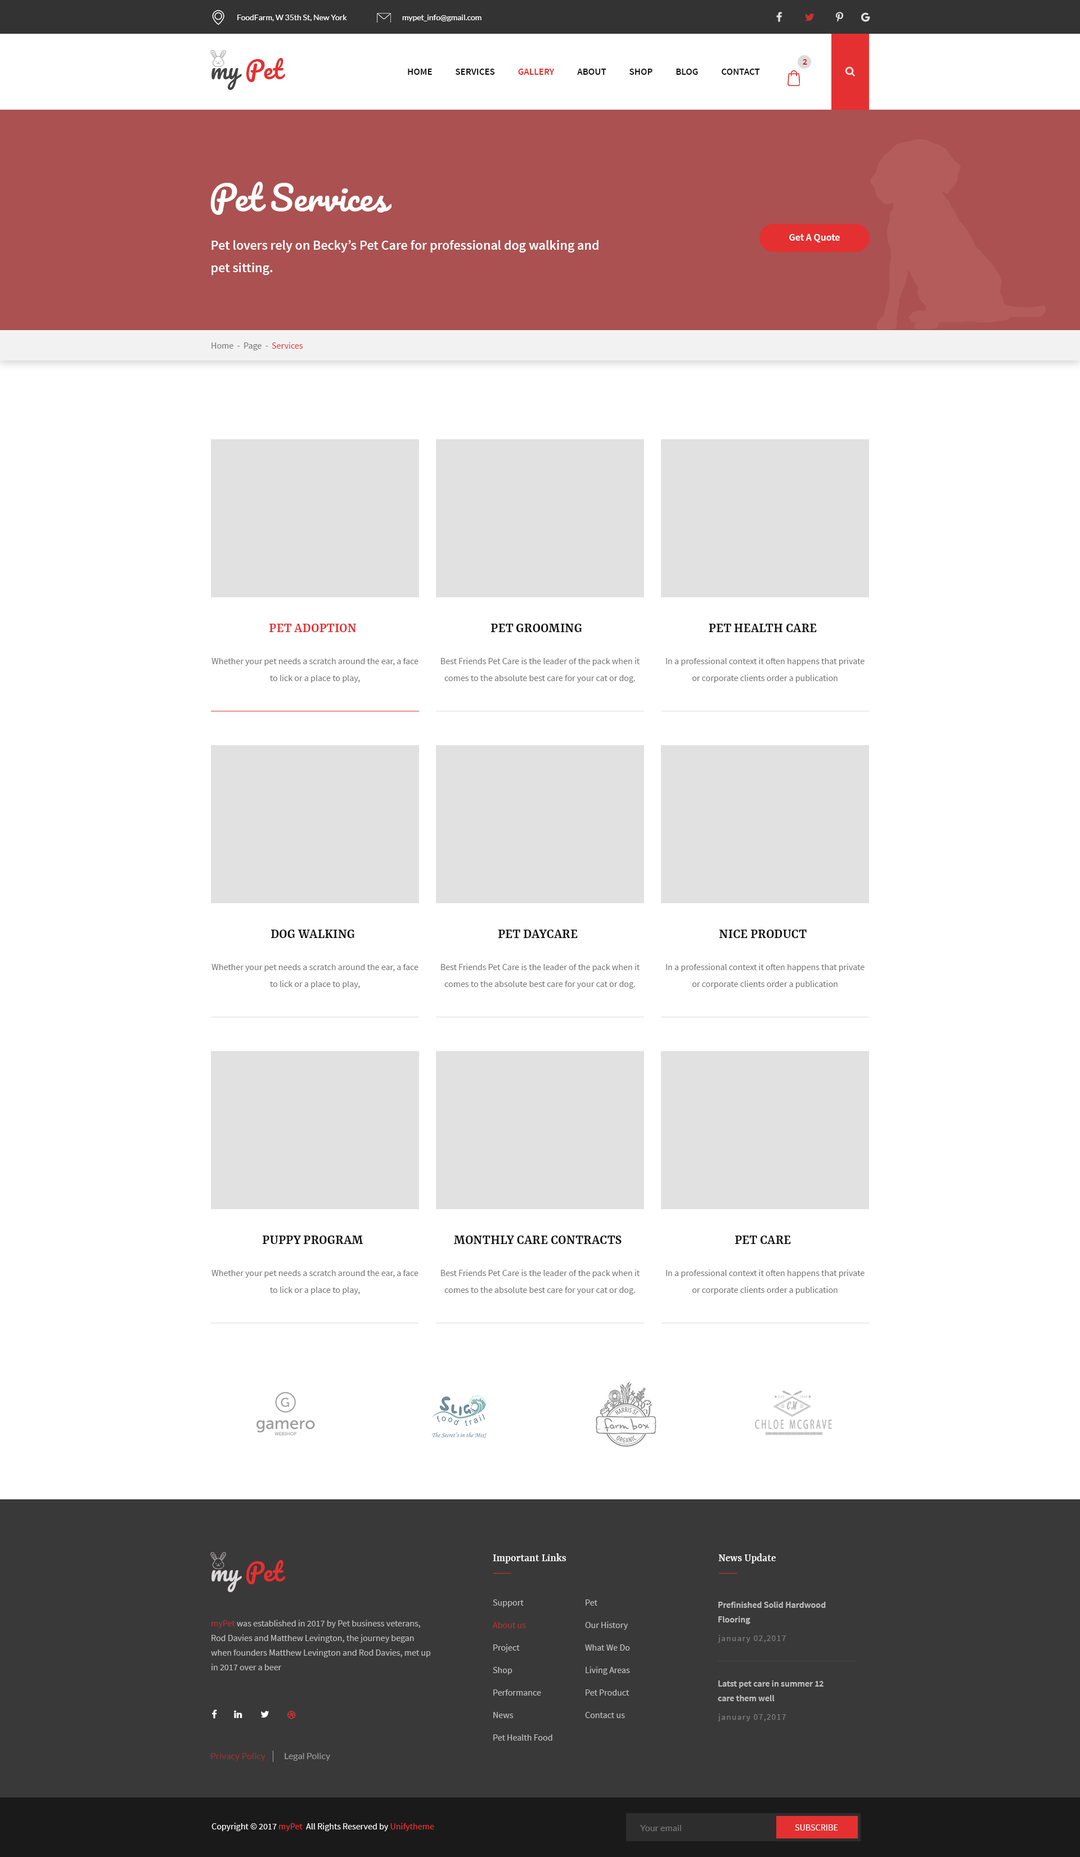
<style>
.page{position:relative;width:1080px;height:1857px;background:#ffffff}
.page>*{position:absolute;margin:0}
.t1{font:7.9px "Lato-Regular";color:#ffffff}
.t2{font:23.6px "Pacifico-Regular";color:#e53031}
.t3{font:23.6px "Pacifico-Regular";color:#454444}
.t4{font:9px "SourceSansPro-SemiBold";color:#d12526;text-transform:uppercase}
.t5{font:9.6px "SourceSansPro-SemiBold";color:#121212;text-transform:uppercase}
.t6{font:9.6px "SourceSansPro-SemiBold";color:#e53031;text-transform:uppercase}
.t7{font:33.8px "Pacifico-Regular";color:#ffffff}
.t8{font:13.5px/22.5px "SourceSansPro-SemiBold";color:#ffffff}
.t9{font:10.1px "SourceSansPro-SemiBold";color:#fffefe}
.t10{font:9px "SourceSansPro-Regular";color:#767575}
.t11{font:9px "SourceSansPro-Regular";color:#e53031}
.t12{font:14.1px "Yrsa-SemiBold";color:#e53031}
.t13{font:14.1px "Yrsa-SemiBold";color:#121212}
.t14{font:14.1px "Yrsa-SemiBold";color:#121212;text-transform:uppercase}
.t15{font:9px/16.9px "SourceSansPro-Regular";color:#737373}
.t16{font:11.2px "Yrsa-Medium";color:#ffffff}
.t17{font:23.6px "Pacifico-Regular";color:#dcdada}
.t18{font:9px/22.5px "SourceSansPro-Regular";color:#c0c0c0}
.t19{font:9px/14.6px "SourceSansPro-SemiBold";color:#c0c0c0}
.t20{font:9px/14.6px "SourceSansPro-Regular";color:#c0c0c0}
.t21{font:8.4px "SourceSansPro-Regular";letter-spacing:0.1em;color:#7d7d7d}
.t22{font:9px "Lato-Regular";color:#8e3536}
.t23{font:9px "Lato-Regular";color:#9c9b9b}
.t24{font:9px "SourceSansPro-Regular";color:#fefefe}
.t25{font:9px "Lato-Regular";color:#777777}
.t26{font:9px "SourceSansPro-Regular";color:#ffffff;text-transform:uppercase}
</style>
<div class="page">
<p class="t1" style="left:237px;top:15px;width:110px;height:6px">FoodFarm, W 35th St, New York</p>
<p class="t1" style="left:402px;top:15px;width:80px;height:6px">mypet_info@gmail.com</p>
<p class="t2" style="left:212px;top:58px;width:73px;height:32px"><span class="t3">my </span>Pet</p>
<p class="t4" style="left:803px;top:59px;width:4px;height:6px">2</p>
<p class="t5" style="left:408px;top:69px;width:352px;height:6px">Home            Services            <span class="t6">Gallery            </span>About            Shop            Blog            Contact</p>
<p class="t7" style="left:210px;top:182px;width:182px;height:33px">Pet Services</p>
<p class="t8" style="left:212px;top:240px;width:386px;height:35px">Pet lovers rely on Becky’s Pet Care for professional dog walking and pet sitting.</p>
<p class="t9" style="left:789px;top:234px;width:51px;height:8px">Get A Quote</p>
<p class="t10" style="left:212px;top:342px;width:91px;height:8px">Home  -  Page  - <span class="t11"> Services</span></p>
<p class="t12" style="left:269px;top:624px;width:88px;height:8px">PET ADOPTION</p>
<p class="t13" style="left:490px;top:624px;width:92px;height:8px">PET GROOMING</p>
<p class="t14" style="left:709px;top:624px;width:108px;height:8px">Pet Health care</p>
<p class="t15" style="left:212px;top:658px;width:206px;height:25px;text-align:center">Whether your pet needs a scratch around the ear, a face to lick or a place to play,</p>
<p class="t15" style="left:441px;top:658px;width:199px;height:25px;text-align:center">Best Friends Pet Care is the leader of the pack when it comes to the absolute best care for your cat or dog.</p>
<p class="t15" style="left:666px;top:658px;width:199px;height:25px;text-align:center">In a professional context it often happens that private or corporate clients order a publication</p>
<p class="t13" style="left:271px;top:930px;width:84px;height:8px">DOG WALKING</p>
<p class="t13" style="left:498px;top:930px;width:80px;height:8px">PET DAYCARE</p>
<p class="t14" style="left:719px;top:930px;width:88px;height:8px">Nice Product</p>
<p class="t15" style="left:212px;top:964px;width:206px;height:25px;text-align:center">Whether your pet needs a scratch around the ear, a face to lick or a place to play,</p>
<p class="t15" style="left:441px;top:964px;width:199px;height:25px;text-align:center">Best Friends Pet Care is the leader of the pack when it comes to the absolute best care for your cat or dog.</p>
<p class="t15" style="left:666px;top:964px;width:199px;height:25px;text-align:center">In a professional context it often happens that private or corporate clients order a publication</p>
<p class="t14" style="left:262px;top:1236px;width:101px;height:8px">Puppy Program</p>
<p class="t14" style="left:453px;top:1236px;width:169px;height:8px">Monthly Care Contracts</p>
<p class="t14" style="left:735px;top:1236px;width:56px;height:8px">Pet Care</p>
<p class="t15" style="left:212px;top:1270px;width:206px;height:25px;text-align:center">Whether your pet needs a scratch around the ear, a face to lick or a place to play,</p>
<p class="t15" style="left:441px;top:1270px;width:199px;height:25px;text-align:center">Best Friends Pet Care is the leader of the pack when it comes to the absolute best care for your cat or dog.</p>
<p class="t15" style="left:666px;top:1270px;width:199px;height:25px;text-align:center">In a professional context it often happens that private or corporate clients order a publication</p>
<p class="t16" style="left:493px;top:1554px;width:73px;height:10px">Important Links</p>
<p class="t16" style="left:718px;top:1554px;width:58px;height:10px">News Update</p>
<p class="t2" style="left:212px;top:1560px;width:73px;height:32px"><span class="t17">my </span>Pet</p>
<p class="t18" style="left:493px;top:1600px;width:59px;height:141px">Support<br>About us <br>Project<br>Shop<br>Performance<br>News<br>Pet Health Food</p>
<p class="t18" style="left:585px;top:1600px;width:45px;height:118px">Pet<br>Our History<br>What We Do<br>Living Areas<br>Pet Product<br>Contact us</p>
<p class="t19" style="left:718px;top:1602px;width:108px;height:22px">Prefinished Solid Hardwood <br>Flooring</p>
<p class="t20" style="left:211px;top:1620px;width:220px;height:51px">myPet was established in 2017 by Pet business veterans, Rod Davies and Matthew Levington, the journey began when founders Matthew Levington and Rod Davies, met up in 2017 over a beer</p>
<p class="t21" style="left:718px;top:1635px;width:68px;height:8px">january 02,2017</p>
<p class="t19" style="left:718px;top:1681px;width:106px;height:21px">Latst pet care in summer 12<br>care them well</p>
<p class="t21" style="left:718px;top:1714px;width:68px;height:8px">january 07,2017</p>
<p class="t22" style="left:211px;top:1753px;width:55px;height:8px">Privacy Policy</p>
<p class="t23" style="left:285px;top:1753px;width:45px;height:8px">Legal Policy</p>
<p class="t24" style="left:212px;top:1823px;width:222px;height:9px">Copyright © 2017 <span class="t11">myPet </span> All Rights Reserved by <span class="t11">Unifytheme</span></p>
<p class="t25" style="left:640px;top:1825px;width:41px;height:7px">Your email</p>
<p class="t26" style="left:795px;top:1825px;width:43px;height:6px">Subscribe</p>
</div>
